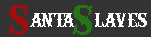
<style>
.page{position:relative;width:151px;height:37px;background:#333333}
.page>*{position:absolute;margin:0}
.t1{font:22.6px "IFCRAILROAD-Bold";letter-spacing:-0.01em;color:#ffffff}
.t2{font:41.5px "IFCRAILROAD-Bold";letter-spacing:0.03em;color:#a00e0e}
.t3{font:22.6px "IFCRAILROAD-Bold";letter-spacing:-0.17em;color:#ffffff}
.t4{font:41.5px "IFCRAILROAD-Bold";letter-spacing:-0.21em;color:#267616}
</style>
<div class="page">
<p class="t1" style="left:8px;top:5px;width:139px;height:30px"><span class="t2">S</span>an<span class="t3">ta </span><span class="t4">S      </span>laves</p>
</div>
